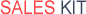
<style>
.page{position:relative;width:86px;height:14px;background:#ffffff}
.page>*{position:absolute;margin:0}
.t1{font:18.7px "ArialMT";color:#ff3f3f;scale:0.92 1}
.t2{font:18.7px "ArialMT";color:#3a445c;scale:0.92 1}
</style>
<div class="page">
<p class="t1" style="left:0px;top:0px;width:87px;height:15px">SALES <span class="t2">KIT</span></p>
</div>
